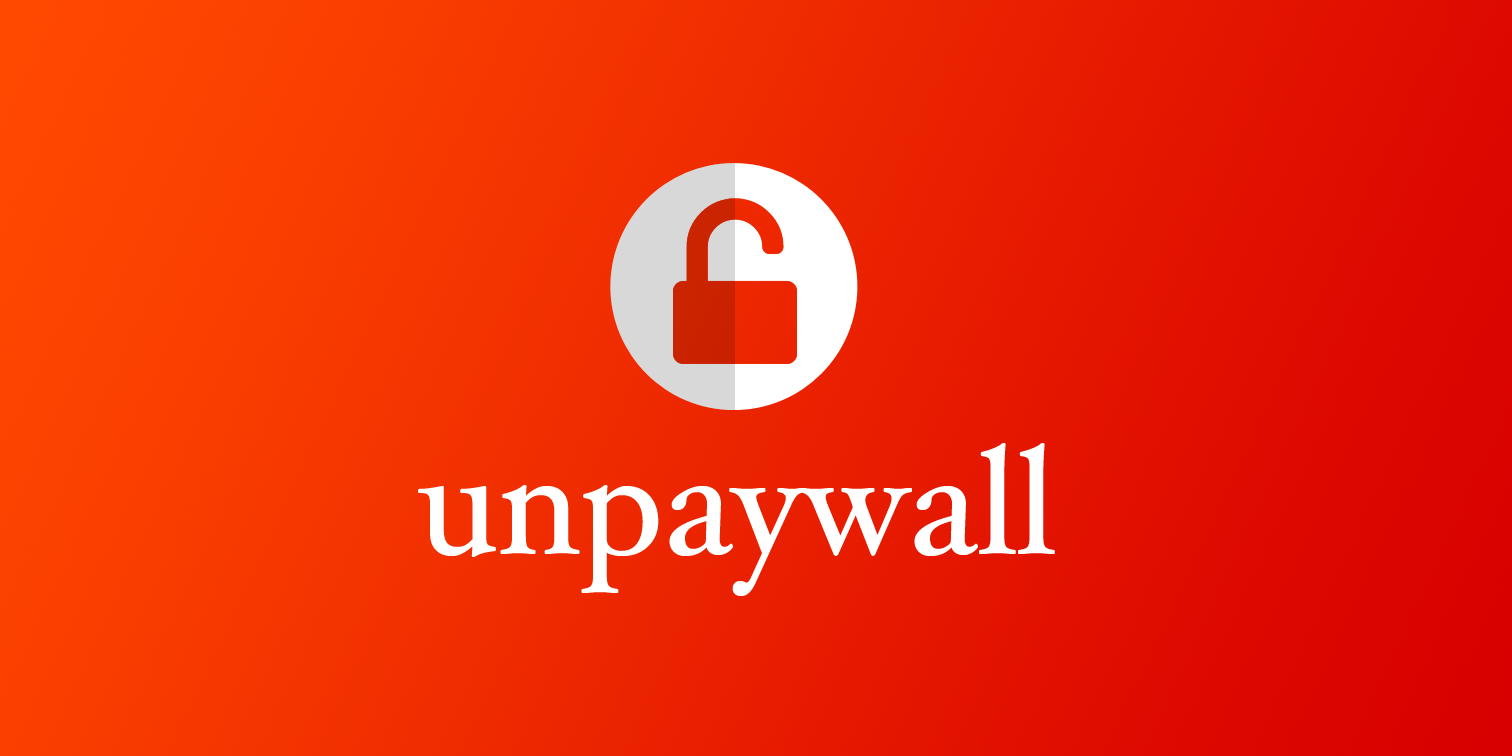
<style>
.page{position:relative;width:1512px;height:756px}
.page>*{position:absolute;margin:0}
.t1{font:152.4px "HoeflerText-Regular";color:#ffffff}
</style>
<div class="page">
<p class="t1" style="left:418px;top:443px;width:637px;height:153px">unpaywall</p>
</div>
